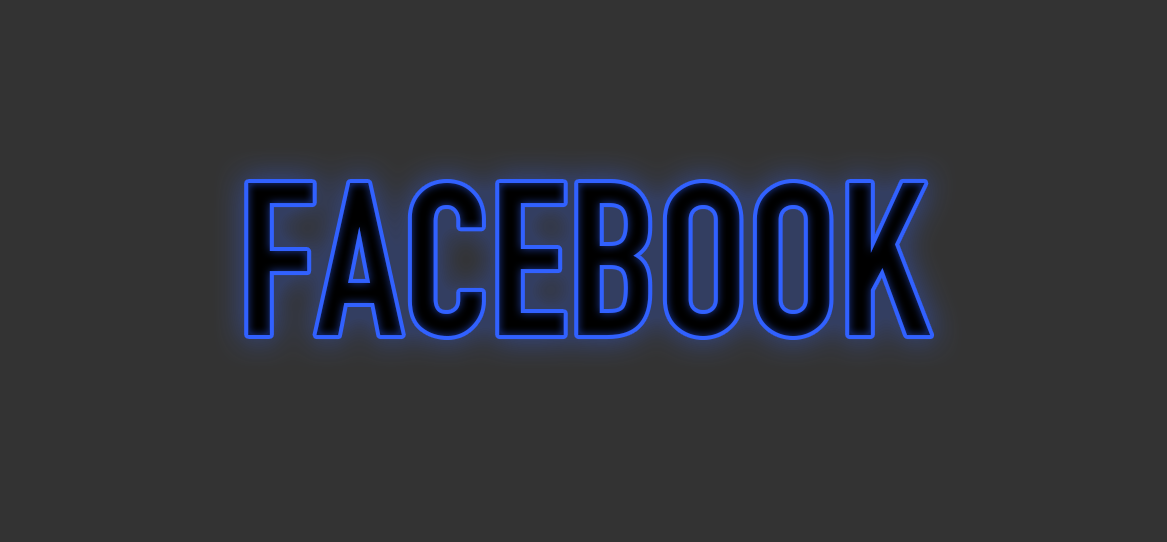
<style>
.page{position:relative;width:1167px;height:542px;background:#333333}
.page>*{position:absolute;margin:0}
.t1{font:212.1px "DINEngschrift";color:#03050e}
</style>
<div class="page">
<p class="t1" style="left:248px;top:182px;width:683px;height:154px">FACEBOOK</p>
</div>
